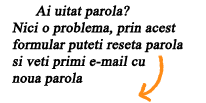
<style>
.page{position:relative;width:206px;height:103px;background:#ffffff}
.page>*{position:absolute;margin:0}
.t1{font:14px "IskoolaPota";color:#010101;font-weight:bold;font-style:italic}
</style>
<div class="page">
<p class="t1" style="left:12px;top:5px;width:171px;height:81px">Ai uitat parola?<br>Nici o problema, prin acest<br>formular puteti reseta parola <br>si veti primi e-mail cu<br>noua parola</p>
</div>
